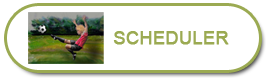
<style>
.page{position:relative;width:270px;height:81px;background:#ffffff}
.page>*{position:absolute;margin:0}
.t1{font:18px "ArialMT";color:#9baa52;font-weight:bold}
</style>
<div class="page">
<p class="t1" style="left:113px;top:31px;width:116px;height:14px">SCHEDULER</p>
</div>
